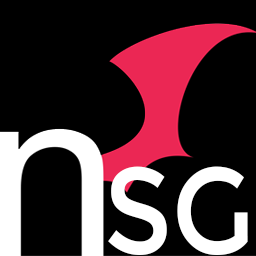
<style>
.page{position:relative;width:256px;height:256px;background:#000000}
.page>*{position:absolute;margin:0}
.t1{font:122px "Montserrat-Regular";color:#ffffff;scale:0.89 1}
</style>
<div class="page">
<p class="t1" style="left:108px;top:166px;width:140px;height:89px">SG</p>
</div>
